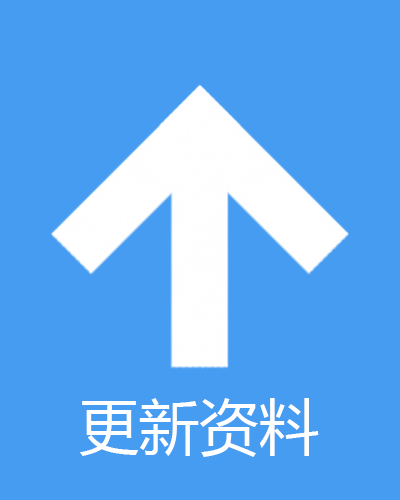
<style>
.page{position:relative;width:400px;height:500px;background:#469cf1}
.page>*{position:absolute;margin:0}
.t1{font:60px "MicrosoftYaHei";color:#ffffff}
</style>
<div class="page">
<p class="t1" style="left:80px;top:398px;width:239px;height:59px">更新资料</p>
</div>
